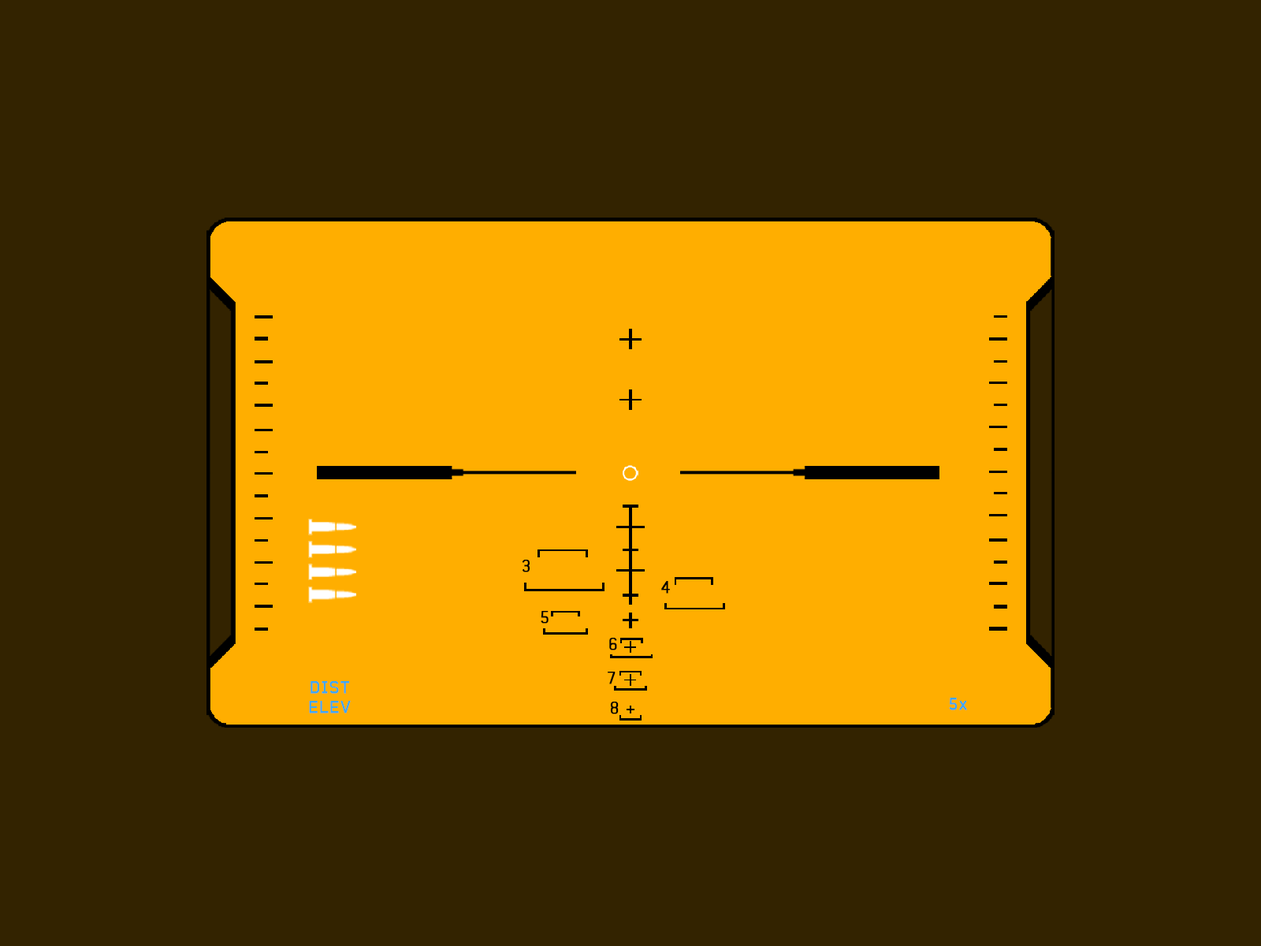
<style>
.page{position:relative;width:1261px;height:946px;background:#332300}
.page>*{position:absolute;margin:0}
.t1{font:16.3px "Baksheesh";letter-spacing:0.08em;color:#000000;font-weight:bold}
.t2{font:16.3px/19.6px "Baksheesh";letter-spacing:0.08em;color:#3ea8f5;font-weight:bold}
.t3{font:16.3px "Baksheesh";letter-spacing:0.08em;color:#3ea8f5;font-weight:bold}
</style>
<div class="page">
<p class="t1" style="left:522px;top:560px;width:8px;height:12px">3</p>
<p class="t1" style="left:661px;top:581px;width:9px;height:12px">4</p>
<p class="t1" style="left:541px;top:611px;width:7px;height:12px">5</p>
<p class="t1" style="left:609px;top:638px;width:8px;height:12px">6</p>
<p class="t1" style="left:608px;top:671px;width:7px;height:13px">7</p>
<p class="t2" style="left:309px;top:681px;width:42px;height:32px;text-align:center">DIST<br>ELEV</p>
<p class="t1" style="left:610px;top:701px;width:9px;height:13px">8</p>
<p class="t3" style="left:949px;top:697px;width:18px;height:13px">5x</p>
</div>
